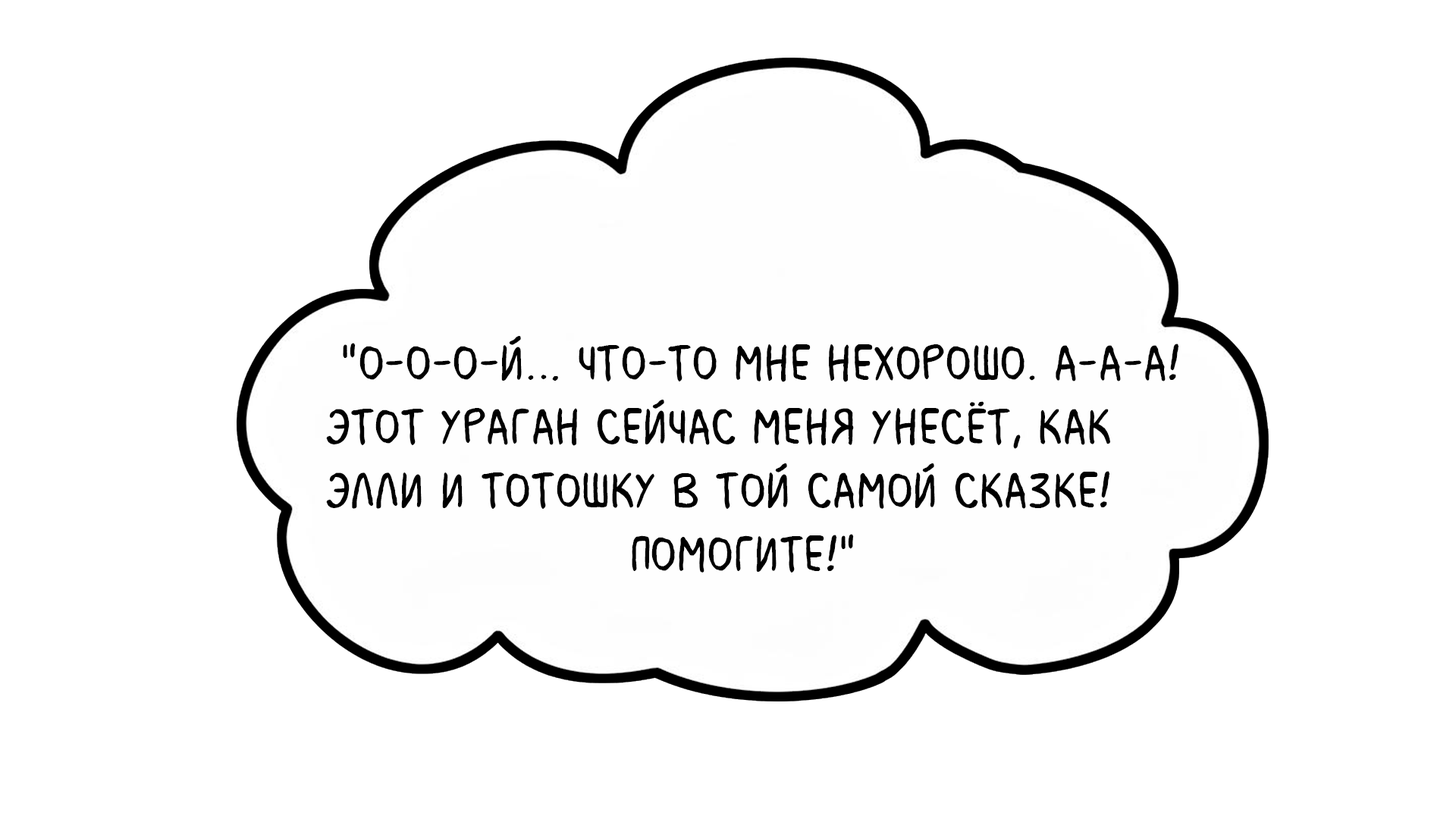
<style>
.page{position:relative;width:1456px;height:819px;background:#ffffff}
.page>*{position:absolute;margin:0}
.t1{font:53.1px "MilkMustacheBB";color:#000000}
</style>
<div class="page">
<p class="t1" style="left:326px;top:336px;width:852px;height:237px">"О-о-о-й… Что-то мне нехорошо. А-а-а! <br>Этот ураган сейчас меня унесёт, как <br>Элли и Тотошку в той самой сказке! <br>                    Помогите!"</p>
</div>
